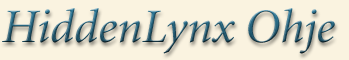
<style>
.page{position:relative;width:349px;height:60px;background:#faf3e0}
.page>*{position:absolute;margin:0}
.t1{font:48px "Minion-Italic"}
</style>
<div class="page">
<p class="t1" style="left:2px;top:8px;width:333px;height:46px">HiddenLynx Ohje</p>
</div>
